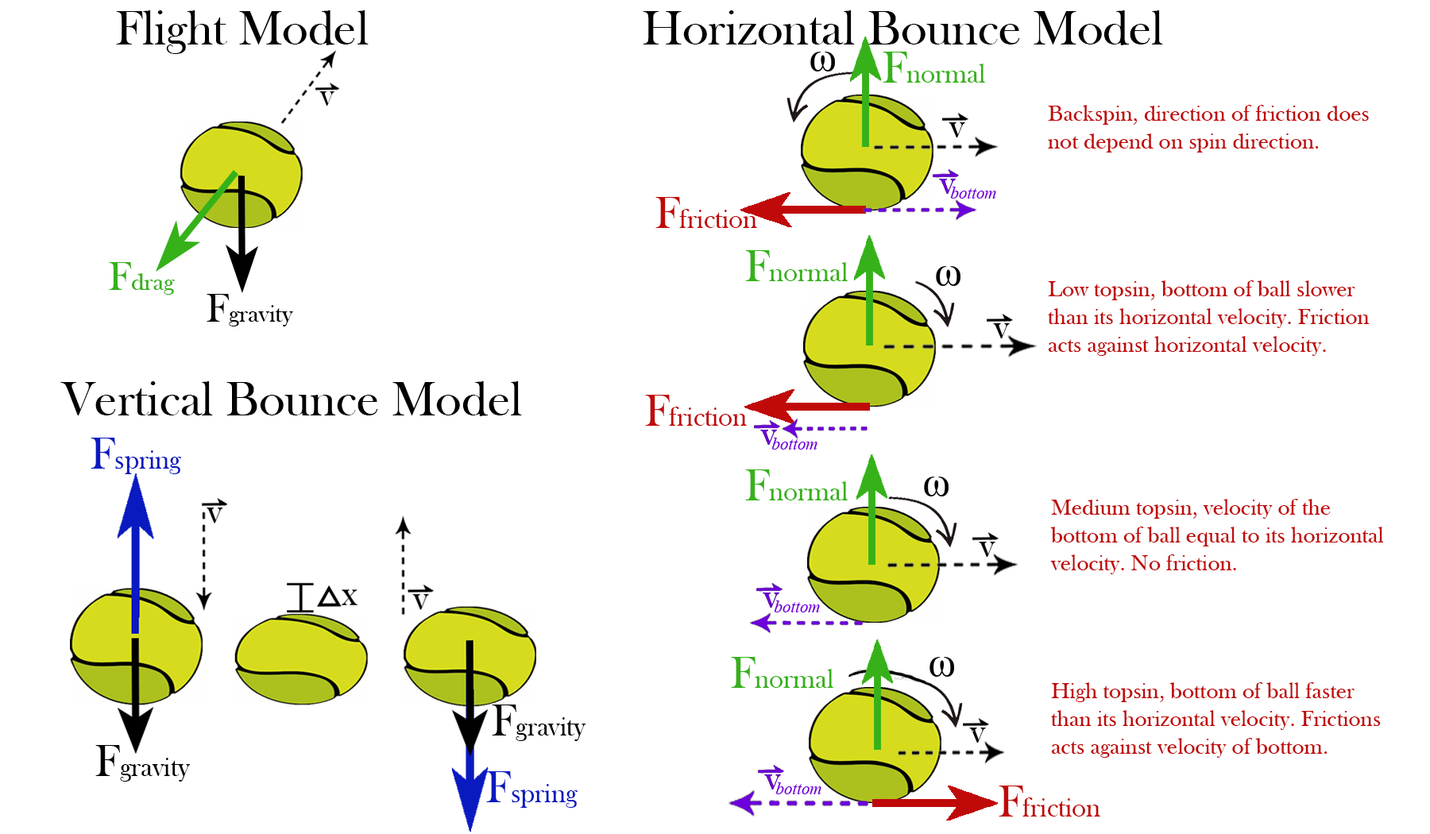
<style>
.page{position:relative;width:1430px;height:834px;background:#ffffff}
.page>*{position:absolute;margin:0}
.t1{font:49.6px "BaskOldFace";color:#010101}
.t2{font:27.5px "BaskOldFace";color:#36b11a}
.t3{font:45.8px "BaskOldFace";color:#36b11a}
.t4{font:33.7px "BaskOldFace";color:#030303}
.t5{font:23.2px "BaskOldFace";color:#c00909}
.t6{font:27.5px "BaskOldFace";color:#c00909}
.t7{font:45.8px "BaskOldFace";color:#c00909}
.t8{font:25.3px "BaskOldFace";color:#36b11a}
.t9{font:42.1px "BaskOldFace";color:#36b11a}
.t10{font:25.3px "BaskOldFace";color:#030303}
.t11{font:42.1px "BaskOldFace";color:#030303}
.t12{font:27.5px "BaskOldFace";color:#091ac0}
.t13{font:45.8px "BaskOldFace";color:#091ac0}
.t14{font:27.5px "BaskOldFace";color:#030303}
.t15{font:45.8px "BaskOldFace";color:#030303}
</style>
<div class="page">
<p class="t1" style="left:116px;top:10px;width:253px;height:44px">Flight Model</p>
<p class="t1" style="left:643px;top:10px;width:520px;height:35px">Horizontal Bounce Model</p>
<p class="t2" style="left:882px;top:52px;width:103px;height:31px"><span class="t3">F</span>normal</p>
<p class="t4" style="left:319px;top:91px;width:15px;height:15px">v</p>
<p class="t5" style="left:1048px;top:105px;width:321px;height:48px">Backspin, direction of friction does not depend on spin direction.</p>
<p class="t6" style="left:655px;top:197px;width:102px;height:31px"><span class="t7">F</span>friction</p>
<p class="t2" style="left:745px;top:250px;width:103px;height:31px"><span class="t3">F</span>normal</p>
<p class="t8" style="left:109px;top:262px;width:66px;height:33px"><span class="t9">F</span>drag</p>
<p class="t5" style="left:1048px;top:280px;width:321px;height:76px">Low topsin, bottom of ball slower than its horizontal velocity. Friction acts against horizontal velocity.</p>
<p class="t10" style="left:207px;top:294px;width:86px;height:32px"><span class="t11">F</span>gravity</p>
<p class="t1" style="left:60px;top:381px;width:462px;height:35px">Vertical Bounce Model</p>
<p class="t6" style="left:645px;top:395px;width:102px;height:31px"><span class="t7">F</span>friction</p>
<p class="t12" style="left:91px;top:438px;width:90px;height:36px"><span class="t13">F</span>spring</p>
<p class="t2" style="left:745px;top:469px;width:103px;height:31px"><span class="t3">F</span>normal</p>
<p class="t5" style="left:1050px;top:499px;width:333px;height:75px">Medium topsin, velocity of the bottom of ball equal to its horizontal velocity. No friction.</p>
<p class="t2" style="left:731px;top:657px;width:102px;height:31px"><span class="t3">F</span>normal</p>
<p class="t5" style="left:1051px;top:682px;width:329px;height:76px">High topsin, bottom of ball faster than its horizontal velocity. Frictions acts against velocity of bottom.</p>
<p class="t14" style="left:492px;top:705px;width:94px;height:36px"><span class="t15">F</span>gravity</p>
<p class="t14" style="left:95px;top:745px;width:96px;height:37px"><span class="t15">F</span>gravity</p>
<p class="t12" style="left:486px;top:771px;width:91px;height:37px"><span class="t13">F</span>spring</p>
<p class="t6" style="left:998px;top:786px;width:102px;height:31px"><span class="t7">F</span>friction</p>
</div>
